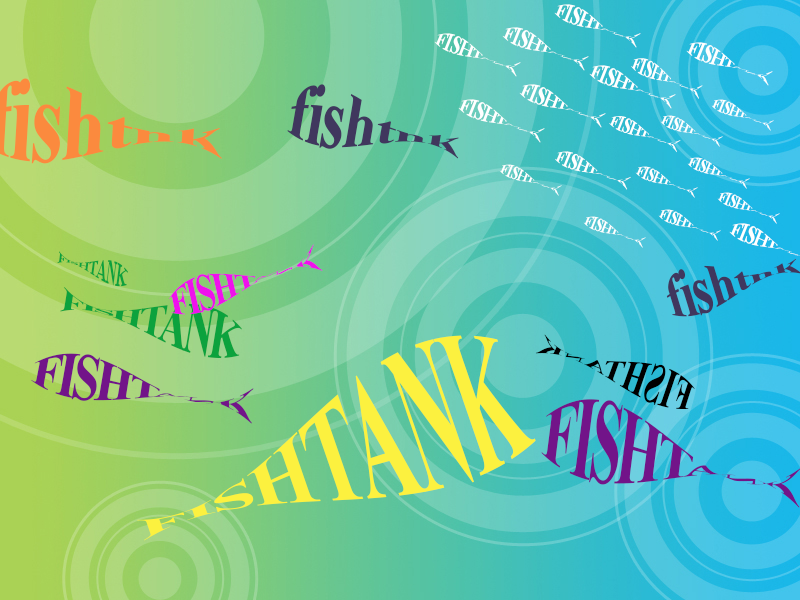
<style>
.page{position:relative;width:800px;height:600px}
.page>*{position:absolute;margin:0}
.t1{font:16px "TimesNewRomanPS-BoldMT";letter-spacing:-0.07em;color:#ffffff;scale:1.18 1}
.t2{font:14.8px "TimesNewRomanPS-BoldMT";letter-spacing:-0.07em;color:#ffffff;scale:1.08 1}
.t3{font:51.6px "TimesNewRomanPS-BoldMT";letter-spacing:-0.03em;color:#40375e;scale:1.2 1}
.t4{font:11.5px "TimesNewRomanPS-BoldMT";letter-spacing:-0.07em;color:#ffffff;scale:1.18 1}
.t5{font:13.4px "TimesNewRomanPS-BoldMT";letter-spacing:-0.07em;color:#ffffff;scale:1.18 1}
.t6{font:14.1px "TimesNewRomanPS-BoldMT";letter-spacing:-0.07em;color:#ffffff;scale:1.18 1}
.t7{font:32.3px "TimesNewRomanPS-BoldMT";letter-spacing:-0.07em;color:#ef11ec;scale:1.04 1}
.t8{font:19.7px "TimesNewRomanPS-BoldMT";letter-spacing:-0.07em;color:#0ca23d;scale:0.79 1}
.t9{font:39.8px "TimesNewRomanPS-BoldMT";letter-spacing:-0.07em;color:#0ca23d}
.t10{font:98.2px "TimesNewRomanPS-BoldMT";letter-spacing:-0.03em;color:#fcf13f;scale:0.83 1}
.t11{font:31.4px "TimesNewRomanPS-BoldMT";color:#000000}
.t12{font:40.5px "TimesNewRomanPS-BoldMT";letter-spacing:-0.07em;color:#721489;scale:1.18 1}
</style>
<div class="page">
<p class="t1" style="left:554px;top:4px;width:87px;height:44px;rotate:21deg">FISHTANK</p>
<p class="t1" style="left:502px;top:27px;width:87px;height:44px;rotate:21deg">FISHTANK</p>
<p class="t1" style="left:434px;top:33px;width:87px;height:44px;rotate:21deg">FISHTANK</p>
<p class="t1" style="left:686px;top:42px;width:87px;height:44px;rotate:21deg">FISHTANK</p>
<p class="t1" style="left:589px;top:65px;width:87px;height:44px;rotate:21deg">FISHTANK</p>
<p class="t2" style="left:631px;top:58px;width:72px;height:41px;rotate:24deg">FISHTANK</p>
<p class="t3" style="left:287px;top:84px;width:172px;height:75px;rotate:10deg">fishtnk</p>
<p class="t1" style="left:519px;top:84px;width:87px;height:44px;rotate:21deg">FISHTANK</p>
<p class="t1" style="left:458px;top:99px;width:87px;height:44px;rotate:21deg">FISHTANK</p>
<p class="t4" style="left:711px;top:99px;width:63px;height:32px;rotate:21deg">FISHTANK</p>
<p class="t5" style="left:609px;top:116px;width:72px;height:37px;rotate:21deg">FISHTANK</p>
<p class="t4" style="left:660px;top:115px;width:63px;height:32px;rotate:21deg">FISHTANK</p>
<p class="t6" style="left:555px;top:151px;width:76px;height:39px;rotate:21deg">FISHTANK</p>
<p class="t4" style="left:687px;top:157px;width:63px;height:32px;rotate:21deg">FISHTANK</p>
<p class="t4" style="left:499px;top:164px;width:63px;height:32px;rotate:21deg">FISHTANK</p>
<p class="t4" style="left:635px;top:166px;width:63px;height:32px;rotate:21deg">FISHTANK</p>
<p class="t4" style="left:717px;top:192px;width:63px;height:32px;rotate:21deg">FISHTANK</p>
<p class="t4" style="left:658px;top:209px;width:63px;height:32px;rotate:21deg">FISHTANK</p>
<p class="t4" style="left:583px;top:216px;width:63px;height:32px;rotate:21deg">FISHTANK</p>
<p class="t7" style="left:169px;top:244px;width:154px;height:71px;rotate:-18deg">FISHTANK</p>
<p class="t8" style="left:57px;top:251px;width:71px;height:36px;rotate:17deg">FISHTANK</p>
<p class="t9" style="left:60px;top:286px;width:182px;height:72px;rotate:14deg">FISHTANK</p>
<p class="t10" style="left:137px;top:335px;width:399px;height:206px;rotate:-19deg">FISHTANK</p>
<p class="t11" style="left:535px;top:334px;width:160px;height:75px;rotate:-160deg">FISHTANK</p>
<p class="t12" style="left:31px;top:353px;width:223px;height:71px;rotate:9deg">FISHTANK</p>
</div>
